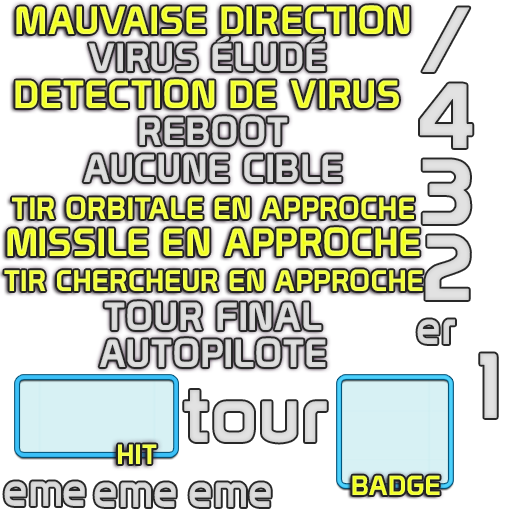
<style>
.page{position:relative;width:512px;height:512px;background:#ffffff}
.page>*{position:absolute;margin:0}
.t1{font:38.5px "Prototype";letter-spacing:0.03em}
.t2{font:38.5px "Prototype";letter-spacing:0.03em;color:#dbdbdb}
.t3{font:38.5px "Prototype";letter-spacing:0.03em;color:#dcdcdc}
.t4{font:30px "Prototype";letter-spacing:0.03em;color:#f3ff48}
.t5{font:29px "Prototype";letter-spacing:0.03em;color:#f3ff48}
.t6{font:47.3px "Prototype";letter-spacing:0.03em;color:#d8d8d8;scale:0.87 1}
.t7{font:90px "Prototype";letter-spacing:0.03em;color:#e0e0e0}
.t8{font:27.1px "Prototype";letter-spacing:0.03em;color:#f4ff50}
.t9{font:27.1px "Prototype";letter-spacing:0.03em}
</style>
<div class="page">
<p class="t1" style="left:16px;top:5px;width:394px;height:29px">MAUVAISE DIRECTION</p>
<p class="t2" style="left:88px;top:36px;width:238px;height:35px">VIRUS ÉLUDÉ</p>
<p class="t1" style="left:15px;top:79px;width:384px;height:29px">DETECTION DE VIRUS</p>
<p class="t3" style="left:139px;top:116px;width:149px;height:29px">REBOOT</p>
<p class="t2" style="left:83px;top:154px;width:259px;height:28px">AUCUNE CIBLE</p>
<p class="t4" style="left:12px;top:196px;width:402px;height:23px">TIR ORBITALE EN APPROCHE</p>
<p class="t1" style="left:7px;top:227px;width:413px;height:29px">MISSILE EN APPROCHE</p>
<p class="t5" style="left:4px;top:269px;width:419px;height:22px">TIR CHERCHEUR EN APPROCHE</p>
<p class="t2" style="left:104px;top:301px;width:218px;height:29px">TOUR FINAL</p>
<p class="t6" style="left:417px;top:319px;width:38px;height:25px">er</p>
<p class="t2" style="left:99px;top:338px;width:227px;height:29px">AUTOPILOTE</p>
<p class="t7" style="left:480px;top:353px;width:17px;height:65px">1</p>
<p class="t8" style="left:118px;top:444px;width:39px;height:20px">HIT</p>
<p class="t6" style="left:4px;top:481px;width:81px;height:25px">eme</p>
<p class="t6" style="left:94px;top:482px;width:82px;height:25px">eme</p>
<p class="t6" style="left:189px;top:482px;width:82px;height:25px">eme</p>
<p class="t9" style="left:352px;top:475px;width:88px;height:20px">BADGE</p>
</div>
